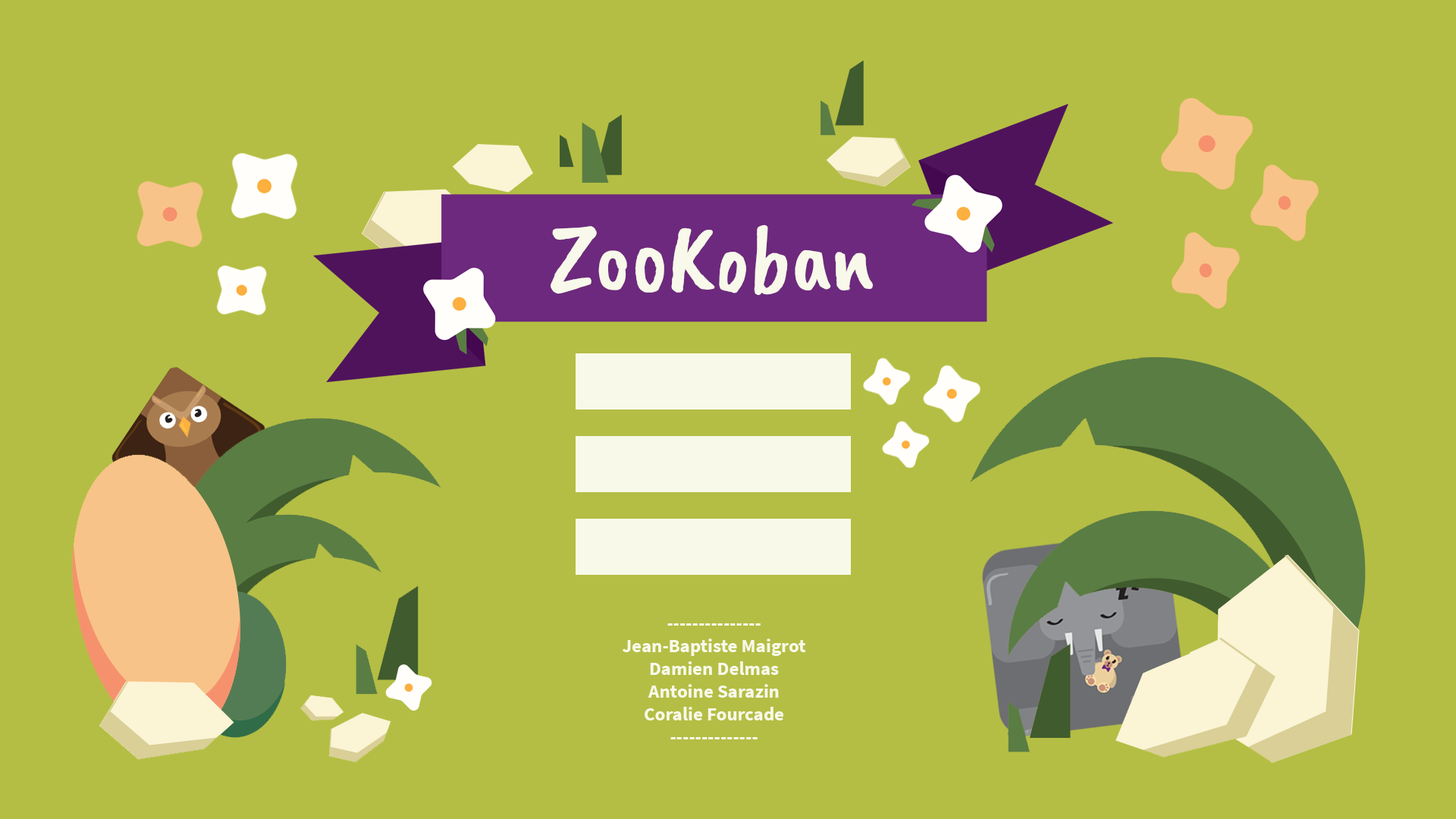
<style>
.page{position:relative;width:1456px;height:819px;background:#b4be44}
.page>*{position:absolute;margin:0}
.t1{font:94.8px "CaveatBrush-Regular";color:#f8f9ea}
.t2{font:19px "SourceSansPro-Bold";color:#f8f9e9}
</style>
<div class="page">
<p class="t1" style="left:551px;top:224px;width:322px;height:71px">ZooKoban</p>
<p class="t2" style="left:622px;top:623px;width:184px;height:116px;text-align:center">---------------<br>Jean-Baptiste Maigrot<br>Damien Delmas<br>Antoine Sarazin<br>Coralie Fourcade<br>--------------</p>
</div>
